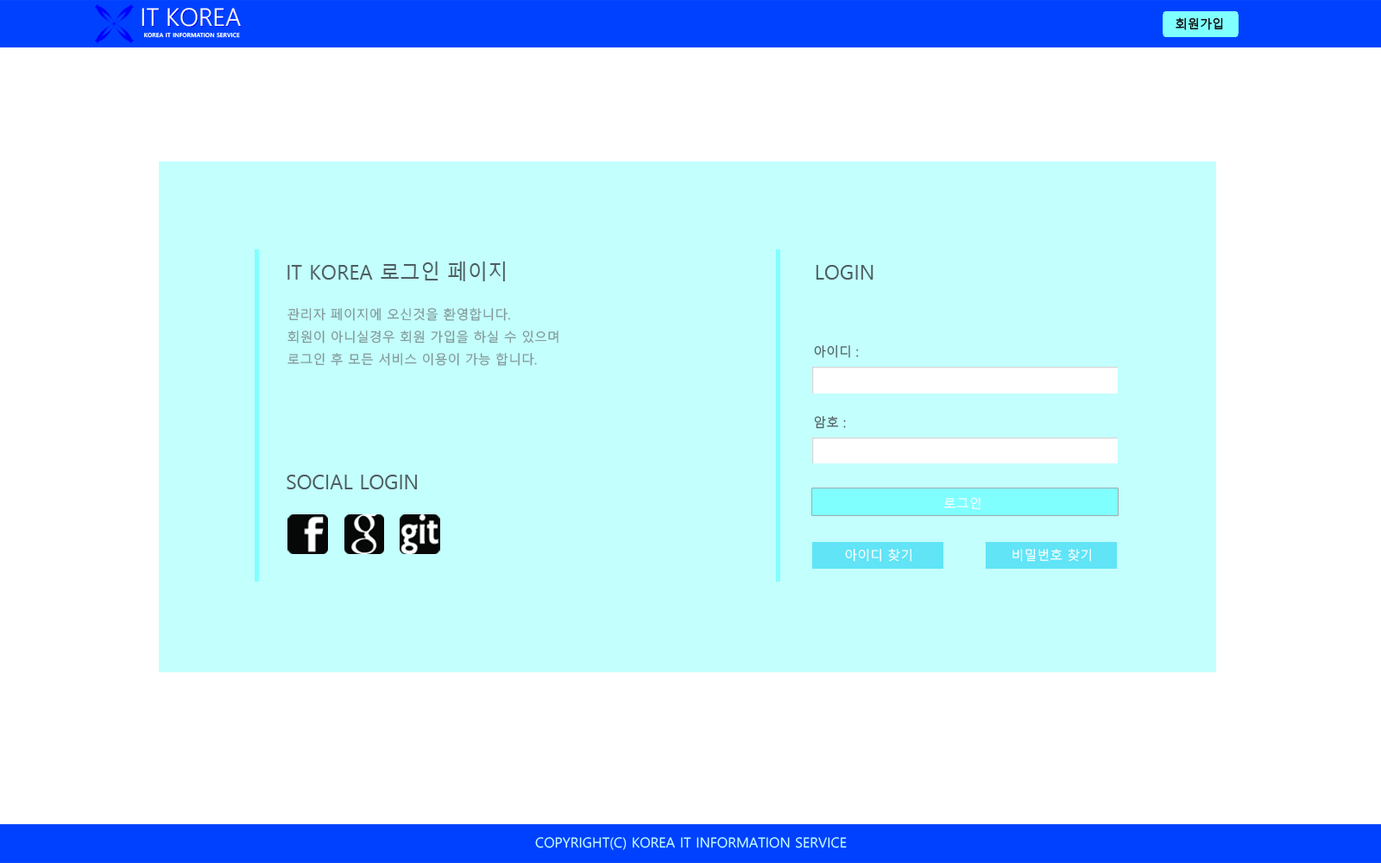
<style>
.page{position:relative;width:1381px;height:863px;background:#ffffff}
.page>*{position:absolute;margin:0}
.t1{font:12.1px "MalgunGothic";color:#060808}
.t2{font:20.7px "MalgunGothic";color:#4e5e60}
.t3{font:12.9px "MalgunGothic";color:#819595}
.t4{font:12.9px "MalgunGothic";color:#4e5e60}
.t5{font:20.7px "MalgunGothic";color:#4e5e60;scale:0.96 1}
.t6{font:12.9px "MalgunGothic";color:#ffffff}
.t7{font:13.8px "MalgunGothic";color:#c3fffd}
</style>
<div class="page">
<p class="t1" style="left:1176px;top:17px;width:47px;height:13px">회원가입</p>
<p class="t2" style="left:287px;top:262px;width:218px;height:19px">IT KOREA 로그인 페이지</p>
<p class="t2" style="left:816px;top:265px;width:58px;height:15px">LOGIN</p>
<p class="t3" style="left:287px;top:307px;width:272px;height:59px">관리자 페이지에 오신것을 환영합니다.<br>회원이 아니실경우 회원 가입을 하실 수 있으며<br>로그인 후 모든 서비스 이용이 가능 합니다.</p>
<p class="t4" style="left:814px;top:345px;width:45px;height:13px">아이디 :</p>
<p class="t4" style="left:814px;top:416px;width:32px;height:13px">암호 :</p>
<p class="t5" style="left:287px;top:475px;width:130px;height:14px">SOCIAL LOGIN</p>
<p class="t6" style="left:944px;top:497px;width:37px;height:12px">로그인</p>
<p class="t6" style="left:845px;top:548px;width:67px;height:14px">아이디 찾기</p>
<p class="t6" style="left:1013px;top:548px;width:78px;height:14px">비밀번호 찾기</p>
<p class="t7" style="left:535px;top:837px;width:312px;height:13px">COPYRIGHT(C) KOREA IT INFORMATION SERVICE</p>
</div>
